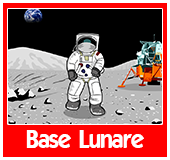
<style>
.page{position:relative;width:170px;height:160px;background:#ff0000}
.page>*{position:absolute;margin:0}
.t1{font:24px "ELEGANCE";color:#ffffff}
</style>
<div class="page">
<p class="t1" style="left:26px;top:130px;width:118px;height:18px">Base Lunare</p>
</div>
